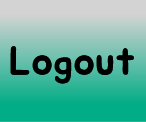
<style>
.page{position:relative;width:146px;height:122px}
.page>*{position:absolute;margin:0}
.t1{font:40px "BMJUA";color:#000000}
</style>
<div class="page">
<p class="t1" style="left:10px;top:46px;width:124px;height:38px">Logout</p>
</div>
